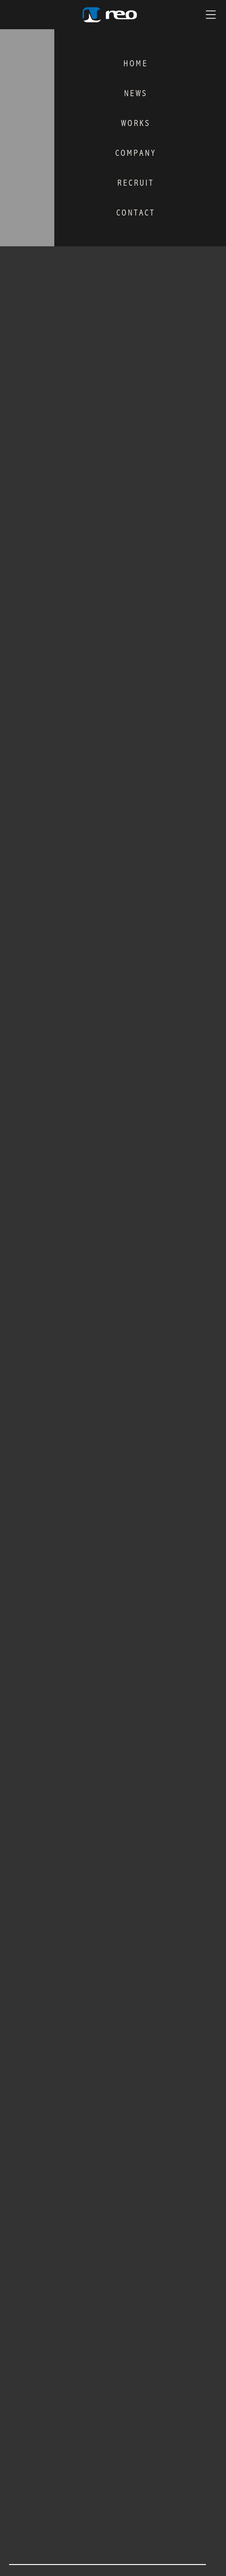
<style>
.page{position:relative;width:226px;height:2576px;background:#333333}
.page>*{position:absolute;margin:0}
.t1{font:8.7px/29.9px "AbadiMT-CondensedLight";letter-spacing:0.2em;color:#e4dfda}
</style>
<div class="page">
<p class="t1" style="left:116px;top:60px;width:39px;height:156px;text-align:center">HOME<br>NEWS<br>WORKS<br>COMPANY<br>RECRUIT<br>CONTACT</p>
</div>
